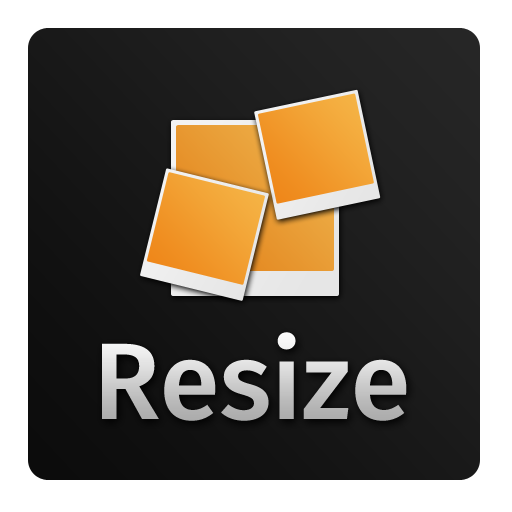
<style>
.page{position:relative;width:512px;height:512px;background:#ffffff}
.page>*{position:absolute;margin:0}
.t1{font:108.6px "FiraSans-Medium"}
</style>
<div class="page">
<p class="t1" style="left:102px;top:332px;width:305px;height:89px">Resize</p>
</div>
